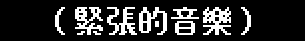
<style>
.page{position:relative;width:305px;height:41px;background:#000000}
.page>*{position:absolute;margin:0}
.t1{font:32px "MadouFutoMaruGothic";color:#ffffff}
</style>
<div class="page">
<p class="t1" style="left:55px;top:7px;width:196px;height:28px">（緊張的音樂）</p>
</div>
